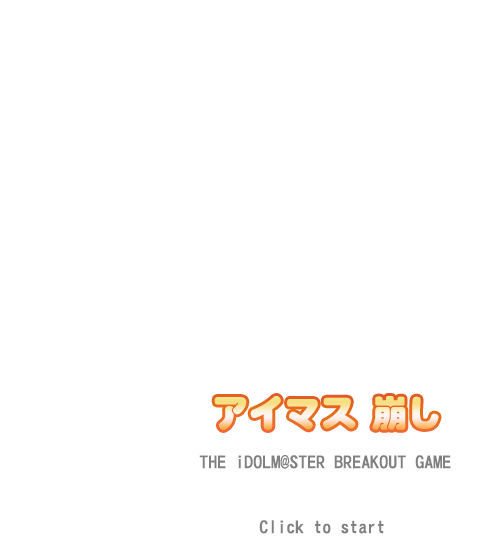
<style>
.page{position:relative;width:480px;height:560px;background:#ffffff}
.page>*{position:absolute;margin:0}
.t1{font:36px "STHupo"}
.t2{font:18px "DFHei-Bd-HK-BF";color:#808080}
</style>
<div class="page">
<p class="t1" style="left:372px;top:396px;width:67px;height:34px">崩し</p>
<p class="t2" style="left:199px;top:455px;width:252px;height:14px">THE iDOLM@STER BREAKOUT GAME</p>
<p class="t2" style="left:259px;top:520px;width:125px;height:14px">Click to start</p>
</div>
